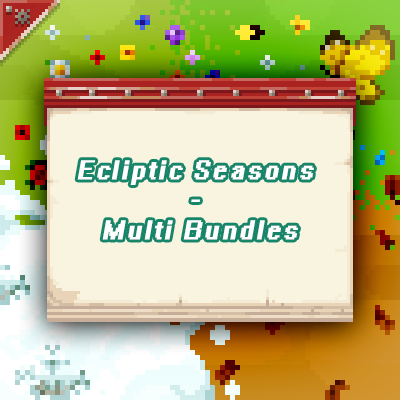
<style>
.page{position:relative;width:400px;height:400px;background:#f8f4e0}
.page>*{position:absolute;margin:0}
.t1{font:30px/30px "System";letter-spacing:0.075em;color:#ffffff;font-weight:bold;font-style:italic}
</style>
<div class="page">
<p class="t1" style="left:77px;top:160px;width:237px;height:80px;text-align:center">Ecliptic Seasons <br>- <br>Multi Bundles</p>
</div>
